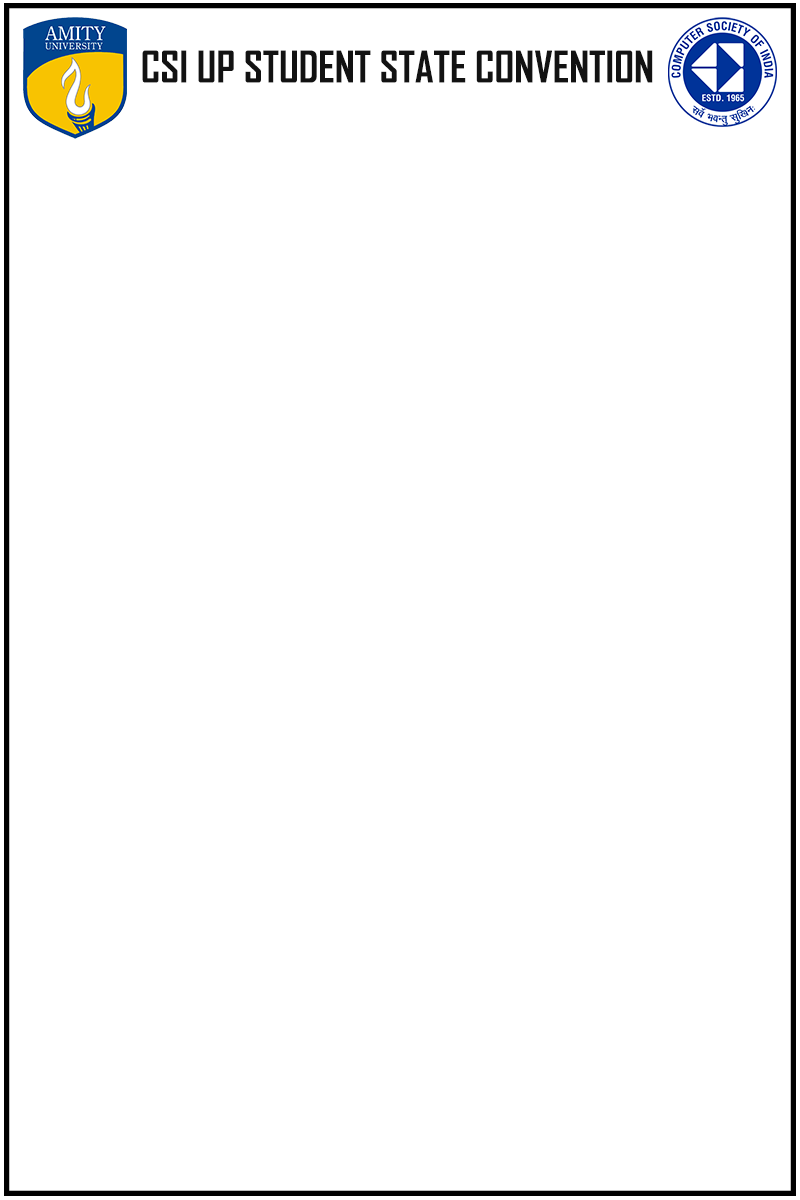
<style>
.page{position:relative;width:800px;height:1200px;background:#ffffff}
.page>*{position:absolute;margin:0}
.t1{font:41.7px "AgencyFB-Bold";color:#121212}
</style>
<div class="page">
<p class="t1" style="left:142px;top:50px;width:511px;height:33px">CSI UP STUDENT STATE CONVENTION</p>
</div>
